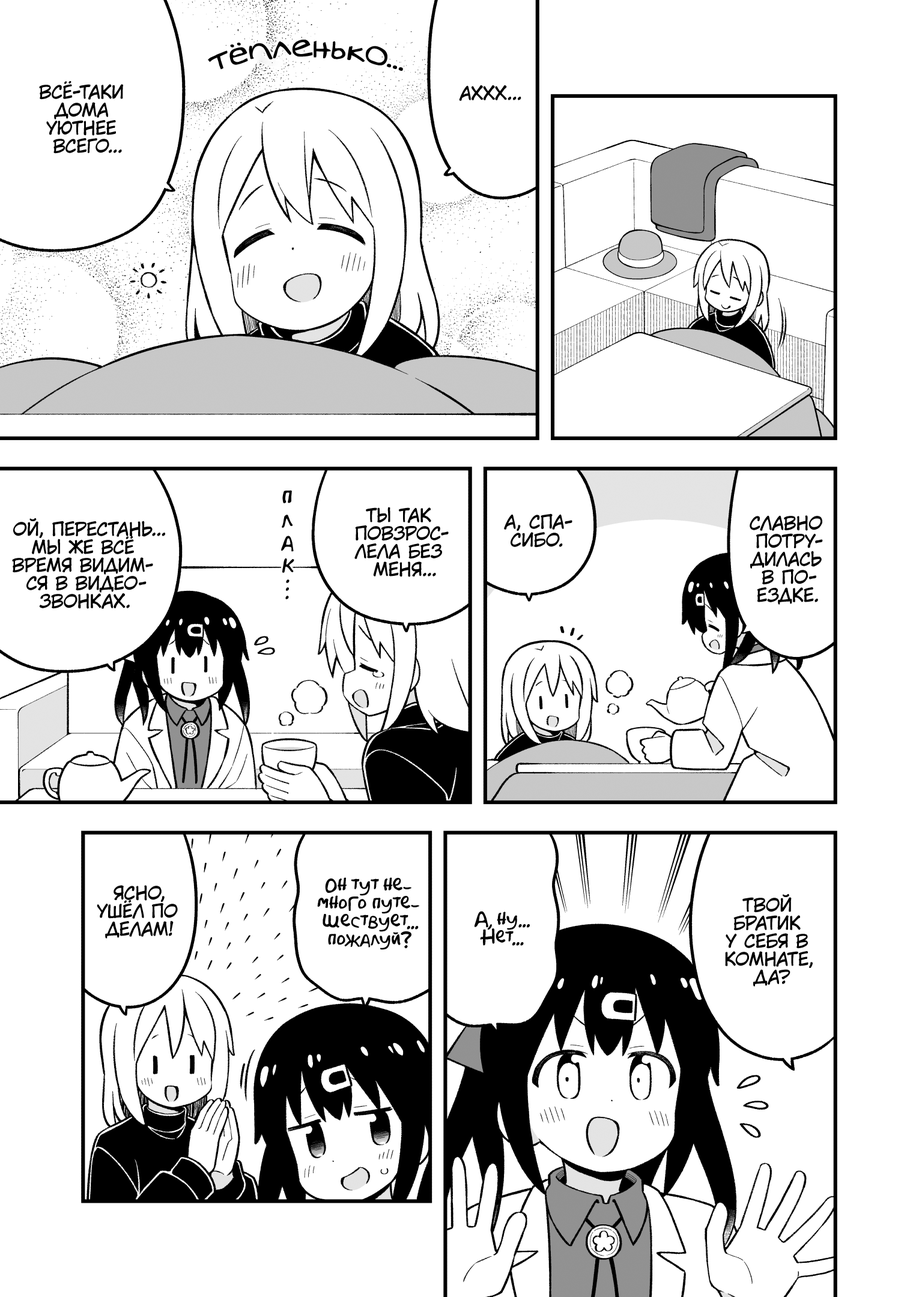
<style>
.page{position:relative;width:919px;height:1297px;background:#ffffff}
.page>*{position:absolute;margin:0}
.t1{font:32.4px "v_Augie";color:#000000}
.t2{font:18px "KuraiVoice2";color:#000000;text-transform:uppercase}
.t3{font:21.6px "AkbarPlain";color:#000000}
.t4{font:18px "AkbarPlain";color:#000000}
</style>
<div class="page">
<p class="t1" style="left:208px;top:40px;width:195px;height:31px">тёпленько...</p>
<p class="t2" style="left:39px;top:81px;width:84px;height:73px;text-align:center">Всё-таки<br>дома<br>уютнее<br>всего...</p>
<p class="t2" style="left:459px;top:85px;width:62px;height:16px">Аххх...</p>
<p class="t3" style="left:282px;top:490px;width:10px;height:13px">п</p>
<p class="t2" style="left:354px;top:507px;width:95px;height:70px;text-align:center">Ты так<br>повзрос-<br>лела без<br>меня...</p>
<p class="t2" style="left:12px;top:518px;width:153px;height:91px;text-align:center">Ой, перестань...<br>Мы же всё<br>время видим-<br>ся в видео-<br>звонках.</p>
<p class="t3" style="left:282px;top:515px;width:11px;height:13px">л</p>
<p class="t2" style="left:504px;top:514px;width:68px;height:34px;text-align:center">А, спа-<br>сибо.</p>
<p class="t2" style="left:750px;top:515px;width:73px;height:90px;text-align:center">Славно<br>потру-<br>дилась<br>в по-<br>ездке.</p>
<p class="t3" style="left:281px;top:536px;width:13px;height:16px">а</p>
<p class="t3" style="left:282px;top:558px;width:12px;height:15px">к</p>
<p class="t4" style="left:286px;top:580px;width:4px;height:3px">.</p>
<p class="t4" style="left:286px;top:587px;width:3px;height:4px">.</p>
<p class="t4" style="left:285px;top:596px;width:4px;height:3px">.</p>
<p class="t4" style="left:317px;top:878px;width:103px;height:72px;text-align:center">Он тут не-<br>много путе-<br>шествует...<br>пожалуй?</p>
<p class="t2" style="left:97px;top:885px;width:81px;height:54px;text-align:center">Ясно,<br>ушёл по<br>делам!</p>
<p class="t2" style="left:725px;top:894px;width:88px;height:93px;text-align:center">Твой<br>братик<br>у себя в<br>комнате,<br>да?</p>
<p class="t4" style="left:475px;top:911px;width:55px;height:35px;text-align:center">А, ну...<br>Нет...</p>
</div>
